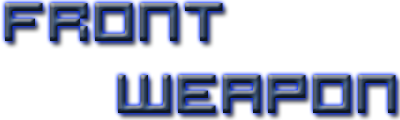
<style>
.page{position:relative;width:400px;height:120px;background:#ffffff}
.page>*{position:absolute;margin:0}
.t1{font:60px "Hooge0553"}
</style>
<div class="page">
<p class="t1" style="left:5px;top:3px;width:391px;height:110px">front<br>     weapon</p>
</div>
